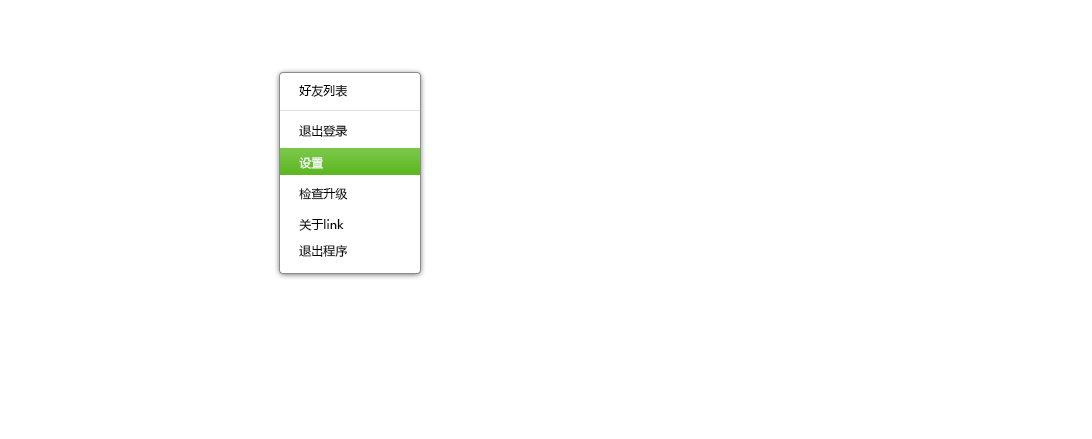
<style>
.page{position:relative;width:1092px;height:439px;background:#ffffff}
.page>*{position:absolute;margin:0}
.t1{font:12px "MicrosoftYaHei";color:#000000}
.t2{font:12px "MicrosoftYaHei";color:#ffffff}
</style>
<div class="page">
<p class="t1" style="left:299px;top:84px;width:49px;height:13px">好友列表</p>
<p class="t1" style="left:299px;top:125px;width:49px;height:12px">退出登录</p>
<p class="t2" style="left:299px;top:157px;width:25px;height:12px">设置</p>
<p class="t1" style="left:299px;top:187px;width:49px;height:13px">检查升级</p>
<p class="t1" style="left:299px;top:219px;width:45px;height:12px">关于link</p>
<p class="t1" style="left:299px;top:245px;width:49px;height:12px">退出程序</p>
</div>
